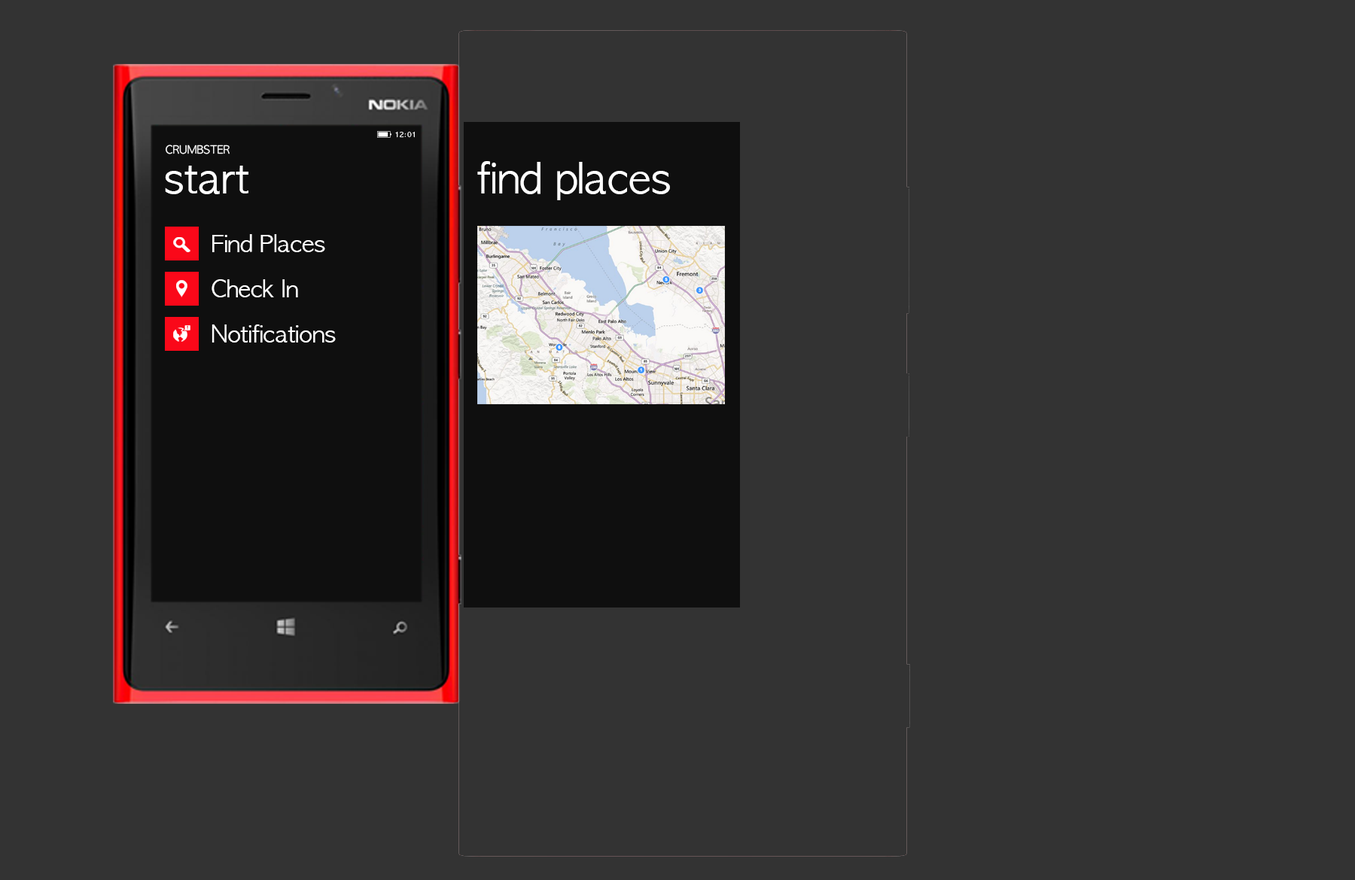
<style>
.page{position:relative;width:1355px;height:880px;background:#333333}
.page>*{position:absolute;margin:0}
.t1{font:6.8px "AppleGothic";color:#ffffff}
.t2{font:10.5px "AppleGothic";color:#ffffff}
.t3{font:40.7px "AppleGothic";color:#ffffff}
.t4{font:22.6px "AppleGothic";color:#ffffff}
</style>
<div class="page">
<p class="t1" style="left:395px;top:132px;width:20px;height:6px">12:01</p>
<p class="t2" style="left:166px;top:145px;width:64px;height:9px">CRUMBSTER</p>
<p class="t3" style="left:477px;top:161px;width:193px;height:39px">find places</p>
<p class="t3" style="left:165px;top:166px;width:83px;height:28px">start</p>
<p class="t4" style="left:212px;top:234px;width:113px;height:18px">Find Places</p>
<p class="t4" style="left:212px;top:279px;width:86px;height:18px">Check In</p>
<p class="t4" style="left:212px;top:324px;width:124px;height:19px">Notifications</p>
</div>
